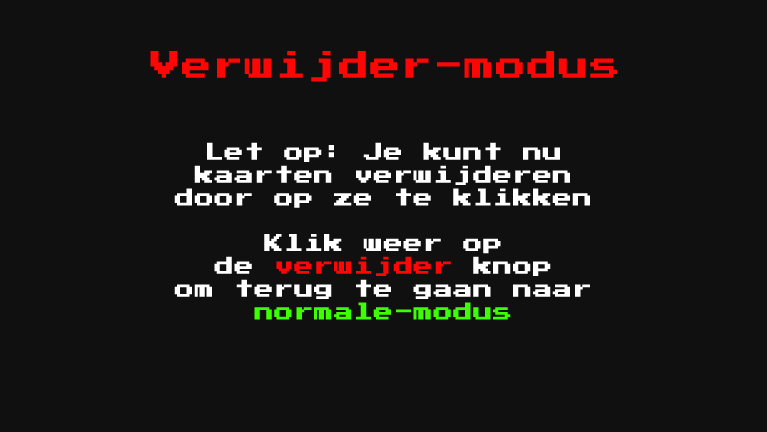
<style>
.page{position:relative;width:767px;height:432px;background:#101010}
.page>*{position:absolute;margin:0}
.t1{font:30px "PressStart2P";letter-spacing:0.02em;color:#ff0606;font-weight:bold}
.t2{font:19px "PressStart2P";letter-spacing:0.02em;color:#ffffff;font-weight:bold}
.t3{font:19px "PressStart2P";letter-spacing:0.02em;color:#ff0606;font-weight:bold}
.t4{font:19px "PressStart2P";letter-spacing:0.02em;color:#3cff00;font-weight:bold}
</style>
<div class="page">
<p class="t1" style="left:150px;top:51px;width:467px;height:31px">Verwijder-modus</p>
<p class="t2" style="left:174px;top:142px;width:416px;height:178px;text-align:center">Let op: Je kunt nu<br>kaarten verwijderen<br>door op ze te klikken<br><br>Klik weer op<br>de <span class="t3">verwijder </span>knop<br>om terug te gaan naar<br><span class="t4">normale-modus</span></p>
</div>
